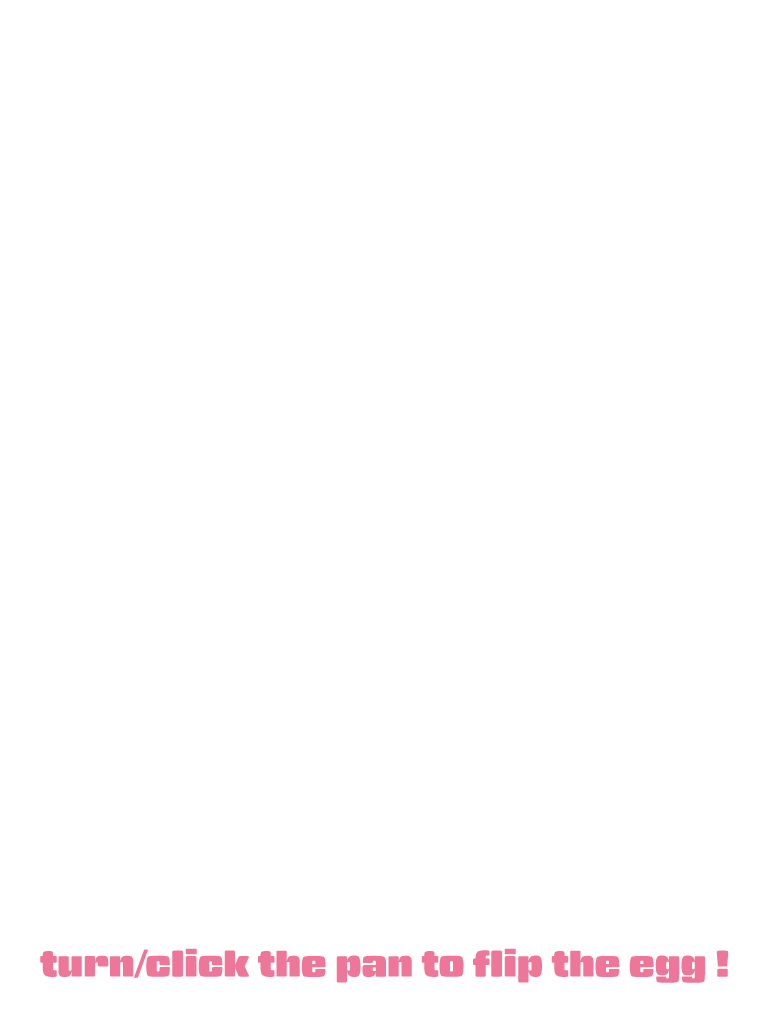
<style>
.page{position:relative;width:768px;height:1024px;background:#ffffff}
.page>*{position:absolute;margin:0}
.t1{font:37.5px "Gigalypse-Regular";letter-spacing:-0.025em;color:#ee7799}
</style>
<div class="page">
<p class="t1" style="left:40px;top:948px;width:689px;height:35px">turn/click the pan to flip the egg !</p>
</div>
